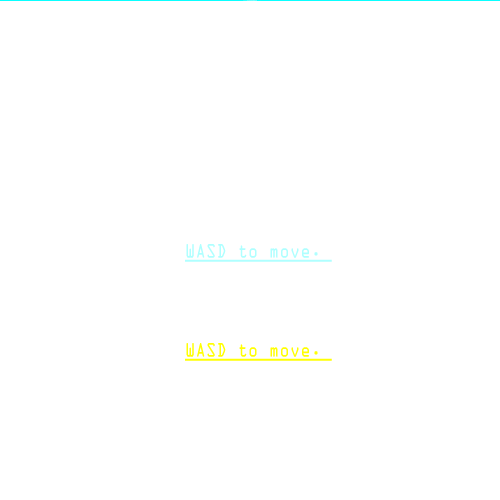
<style>
.page{position:relative;width:500px;height:500px;background:#ffffff}
.page>*{position:absolute;margin:0}
.t1{font:17.7px "OCRAStd";text-decoration:underline;scale:0.82 1}
</style>
<div class="page">
<p class="t1" style="left:185px;top:243px;width:147px;height:18px">WASD to move.</p>
</div>
